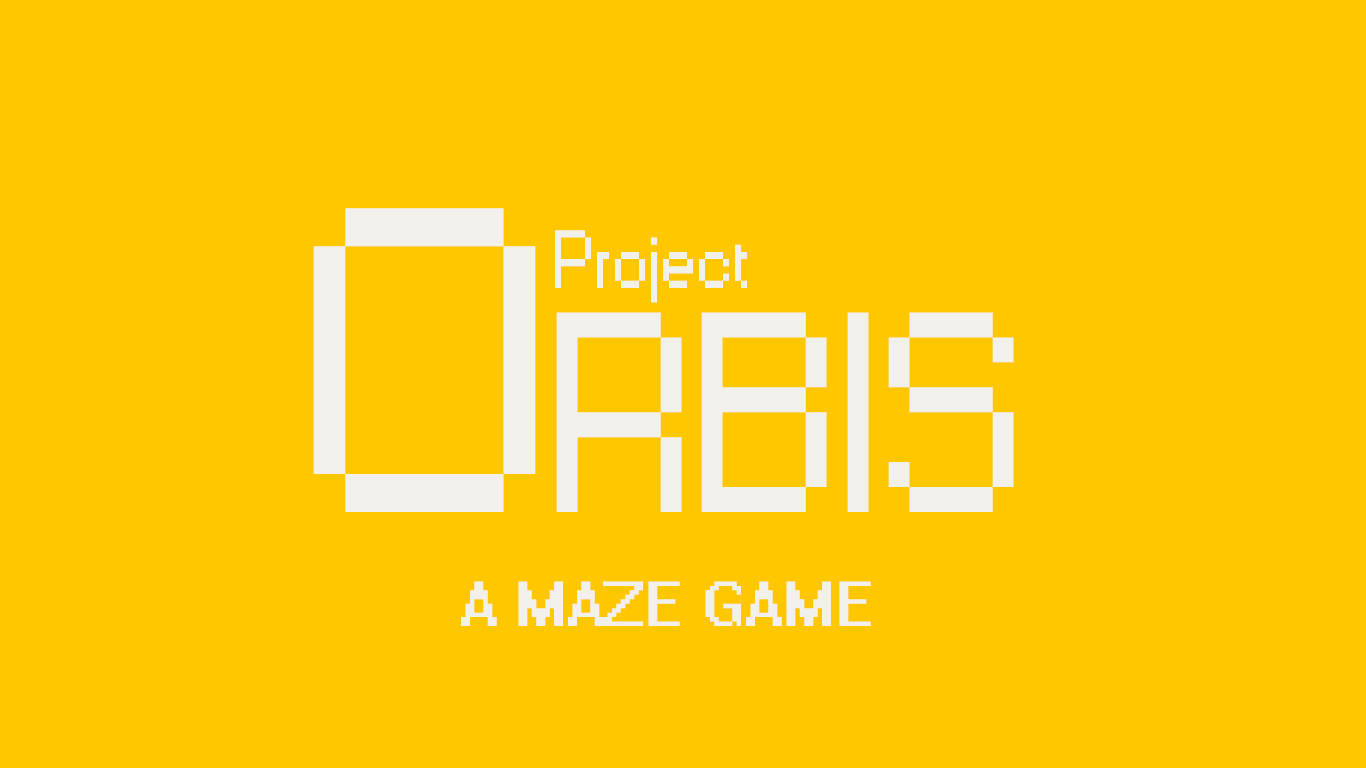
<style>
.page{position:relative;width:1366px;height:768px;background:#ffc700}
.page>*{position:absolute;margin:0}
.t1{font:266px "Small Fonts";color:#f1f0ea}
.t2{font:405px "Small Fonts";color:#f1f0ea}
.t3{font:77px "Small Fonts";color:#f1f0ea}
.t4{font:57px "System";color:#f1f0ea}
</style>
<div class="page">
<p class="t1" style="left:313px;top:208px;width:701px;height:304px"><span class="t2">O</span>RBIS</p>
<p class="t3" style="left:555px;top:230px;width:192px;height:73px">Project</p>
<p class="t4" style="left:461px;top:581px;width:410px;height:45px">A MAZE GAME</p>
</div>
